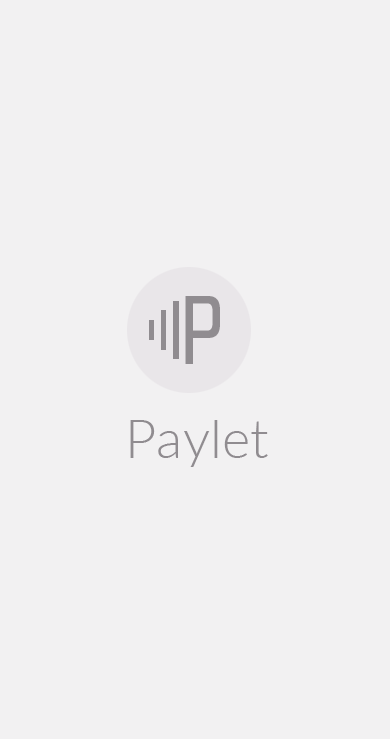
<style>
.page{position:relative;width:390px;height:739px;background:#f2f1f2}
.page>*{position:absolute;margin:0}
.t1{font:95.8px "Quarca-ConReg";color:#908c90}
.t2{font:54.2px "Lato-Light";color:#908c90}
</style>
<div class="page">
<p class="t1" style="left:185px;top:296px;width:35px;height:68px">P</p>
<p class="t2" style="left:130px;top:420px;width:138px;height:47px">Paylet</p>
</div>
